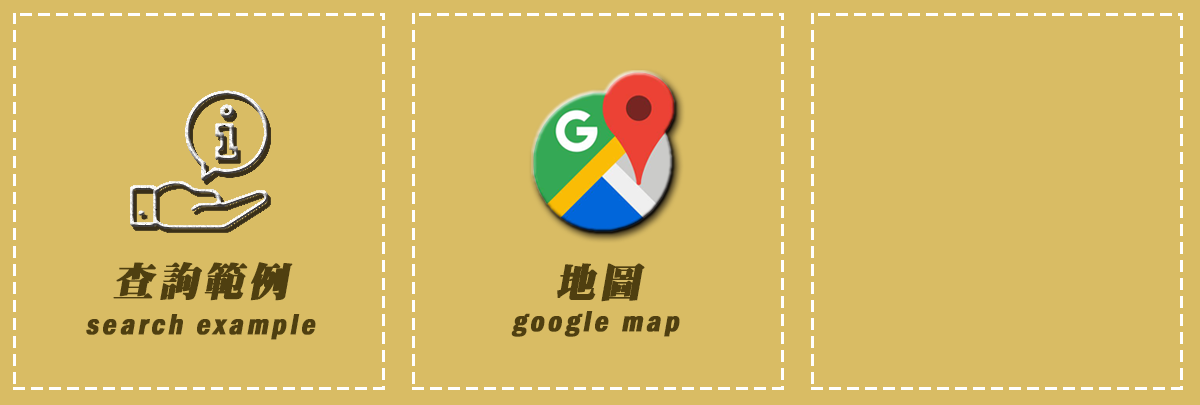
<style>
.page{position:relative;width:1200px;height:405px;background:#d9bc64}
.page>*{position:absolute;margin:0}
.t1{font:40px "DFMing-W12-WIN-BF";letter-spacing:0.1em;color:#4f3f10;font-weight:bold;font-style:italic}
.t2{font:30px "FranklinGothic-DemiCond";letter-spacing:0.1em;color:#4f3f10;font-weight:bold;font-style:italic}
</style>
<div class="page">
<p class="t1" style="left:113px;top:262px;width:180px;height:39px">查詢範例</p>
<p class="t1" style="left:557px;top:263px;width:88px;height:39px">地圖</p>
<p class="t2" style="left:86px;top:314px;width:230px;height:26px">search example</p>
<p class="t2" style="left:511px;top:311px;width:169px;height:26px">google map</p>
</div>
